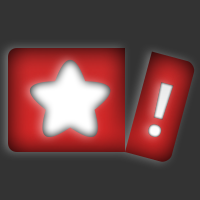
<style>
.page{position:relative;width:200px;height:200px;background:#333333}
.page>*{position:absolute;margin:0}
.t1{font:75.4px "OpenSans-Bold";color:#f4f4f4}
</style>
<div class="page">
<p class="t1" style="left:148px;top:82px;width:26px;height:55px;rotate:15deg">!</p>
</div>
